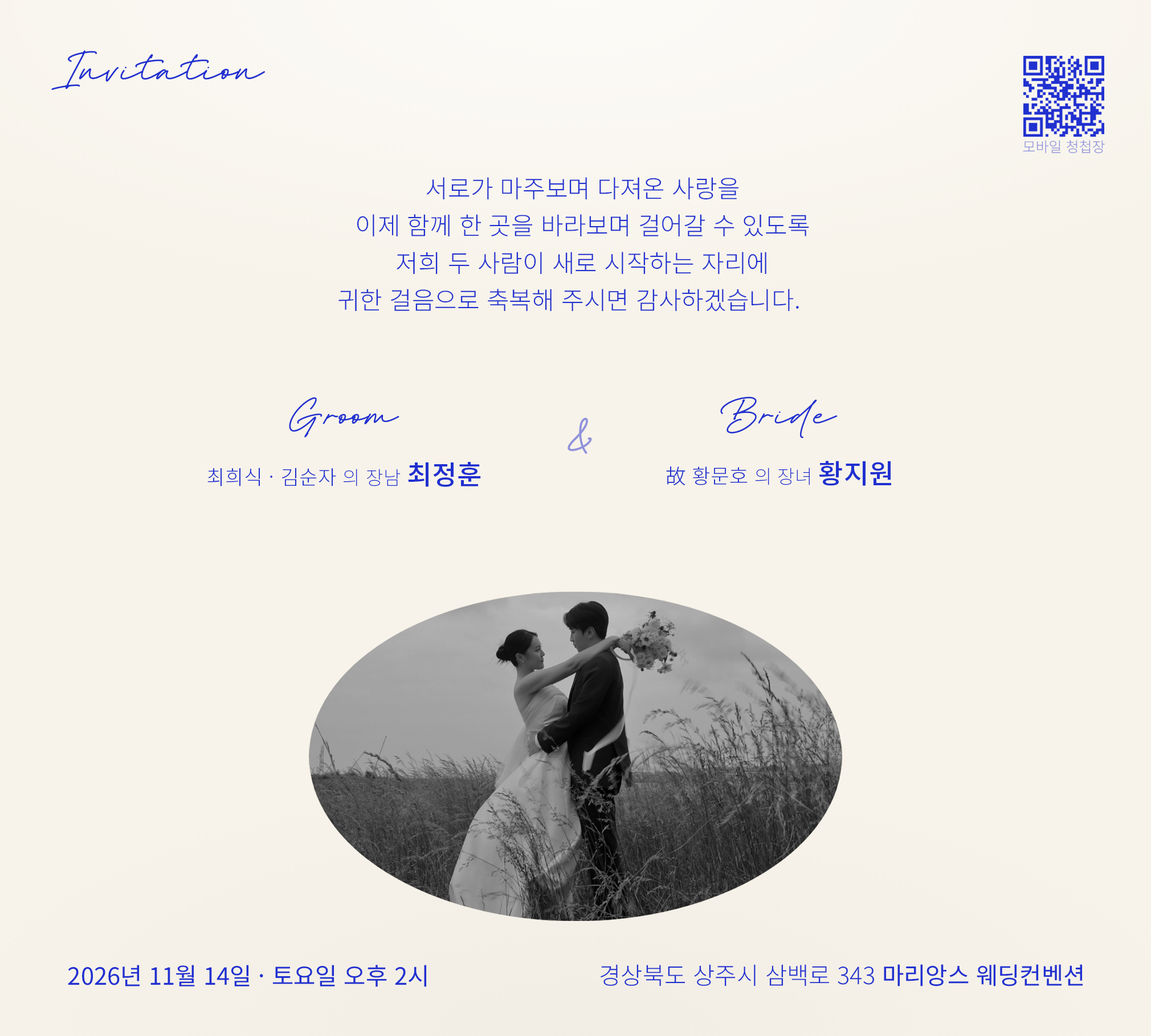
<style>
.page{position:relative;width:1151px;height:1036px;background:#f7f3ea}
.page>*{position:absolute;margin:0}
.t1{font:44.3px "FestiganRegular";color:#2030d0}
.t2{font:14.2px "NotoSansKR-Light";color:#9093dc;font-weight:bold}
.t3{font:24.6px/37.2px "NotoSansKR-Light";color:#2030d0;font-weight:bold}
.t4{font:41.9px "FestiganRegular";color:#2030d0}
.t5{font:56.8px "BrittanySignatureRegular";color:#9092db}
.t6{font:20.3px "NotoSansCJKkr-Light";letter-spacing:0.01em;color:#2030d0}
.t7{font:19px "NotoSansCJKkr-Thin";letter-spacing:0.01em;color:#2030d0}
.t8{font:27.1px "NotoSansCJKkr-Medium";letter-spacing:0.01em;color:#2030d0}
.t9{font:23.7px "NotoSansKR-Regular";color:#2030d0}
.t10{font:23.7px "NotoSansKR-Light";color:#2030d0}
</style>
<div class="page">
<p class="t1" style="left:51px;top:50px;width:214px;height:40px">Invitation</p>
<p class="t2" style="left:1023px;top:140px;width:82px;height:13px">모바일 청첩장</p>
<p class="t3" style="left:338px;top:177px;width:471px;height:135px;text-align:center">서로가 마주보며 다져온 사랑을<br>이제 함께 한 곳을 바라보며 걸어갈 수 있도록<br>저희 두 사람이 새로 시작하는 자리에<br>귀한 걸음으로 축복해 주시면 감사하겠습니다.</p>
<p class="t4" style="left:289px;top:397px;width:110px;height:41px">Groom</p>
<p class="t4" style="left:720px;top:396px;width:117px;height:43px">Bride</p>
<p class="t5" style="left:567px;top:418px;width:25px;height:36px">&amp;</p>
<p class="t6" style="left:666px;top:461px;width:225px;height:25px">故 황문호 <span class="t7">의 장녀 </span><span class="t8">황지원</span></p>
<p class="t6" style="left:207px;top:462px;width:274px;height:25px">최희식 · 김순자 <span class="t7">의 장남 </span><span class="t8">최정훈</span></p>
<p class="t9" style="left:68px;top:965px;width:359px;height:22px">2026년 11월 14일 · 토요일 오후 2시</p>
<p class="t10" style="left:600px;top:964px;width:483px;height:23px">경상북도 상주시 삼백로 343 <span class="t9">마리앙스 웨딩컨벤션</span></p>
</div>
